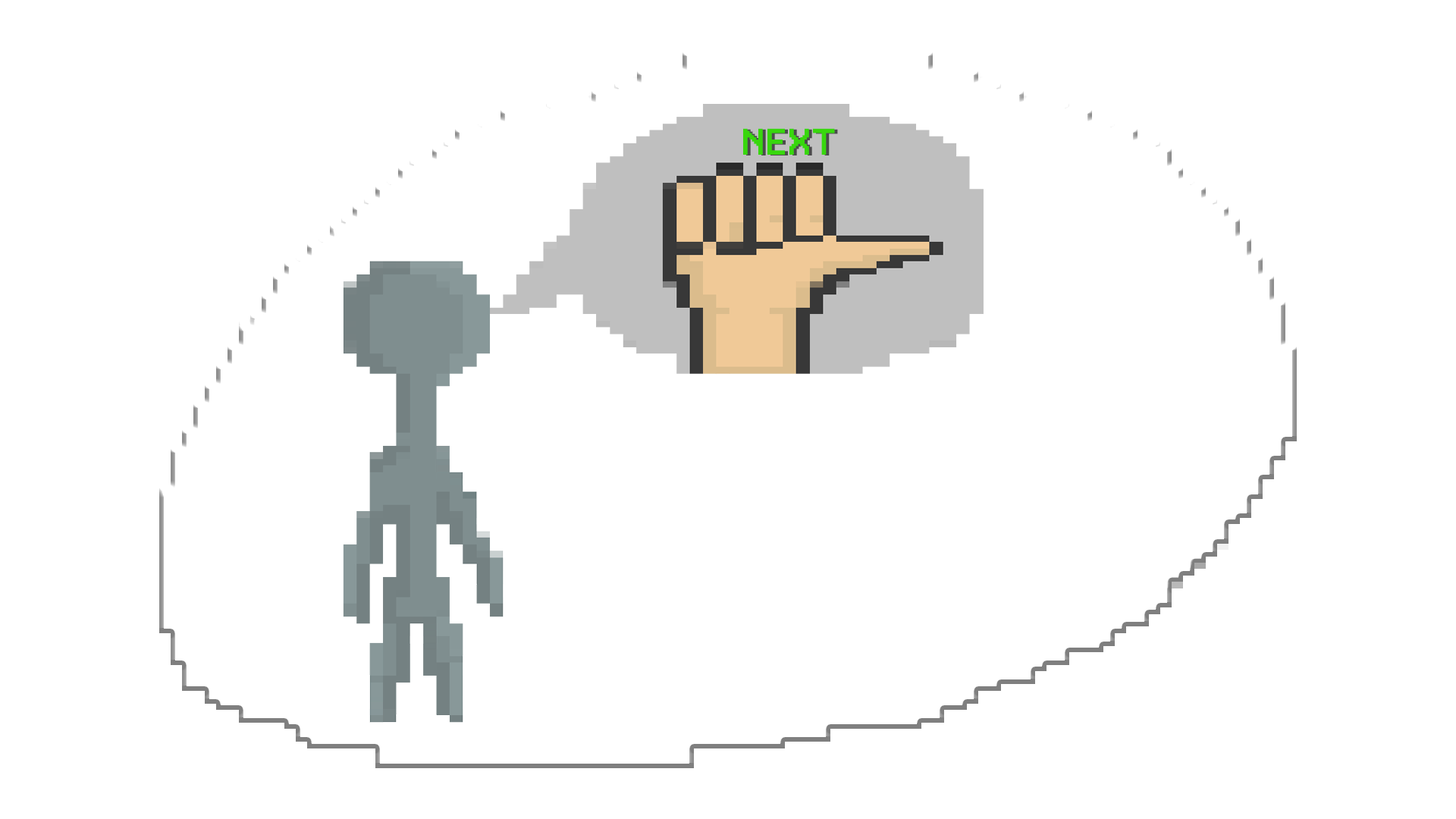
<style>
.page{position:relative;width:1456px;height:819px;background:#ffffff}
.page>*{position:absolute;margin:0}
.t1{font:34.8px "PixelGameFont";color:#38d70d;text-transform:uppercase}
.t2{font:34.8px "PixelGameFont";text-transform:uppercase}
</style>
<div class="page">
<p class="t1" style="left:743px;top:128px;width:92px;height:27px">next</p>
<p class="t2" style="left:746px;top:129px;width:92px;height:26px">next</p>
</div>
